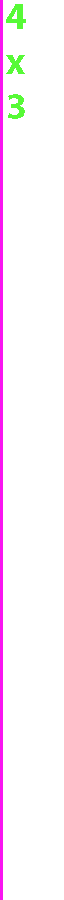
<style>
.page{position:relative;width:64px;height:900px;background:#ffffff}
.page>*{position:absolute;margin:0}
.t1{font:37.8px "MyriadPro-Bold";color:#57fa37}
</style>
<div class="page">
<p class="t1" style="left:6px;top:4px;width:20px;height:115px">4<br>х<br>3</p>
</div>
